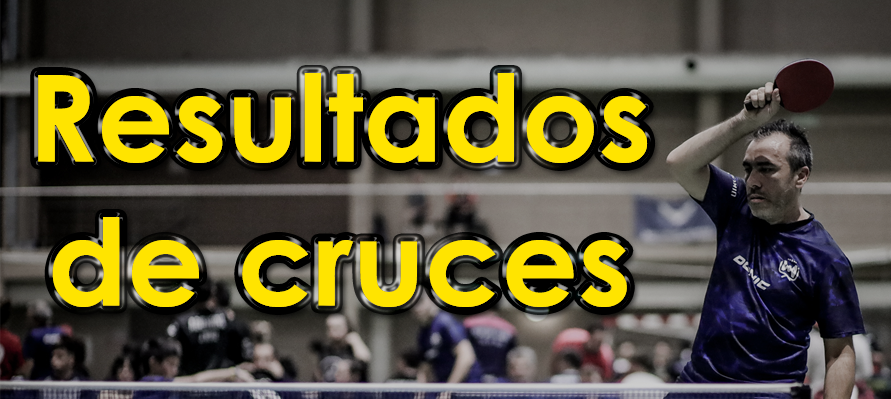
<style>
.page{position:relative;width:891px;height:399px}
.page>*{position:absolute;margin:0}
.t1{font:120px "CenturyGothic-Bold";color:#ffe400}
</style>
<div class="page">
<p class="t1" style="left:38px;top:73px;width:610px;height:234px;text-align:center">Resultados de cruces</p>
<p class="t1" style="left:38px;top:73px;width:610px;height:234px;text-align:center">Resultados<br>de cruces</p>
</div>
